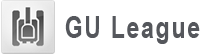
<style>
.page{position:relative;width:200px;height:55px;background:#ffffff}
.page>*{position:absolute;margin:0}
.t1{font:30px "Arial-BoldMT";letter-spacing:0.09em;color:#55575c;scale:0.75 1}
</style>
<div class="page">
<p class="t1" style="left:65px;top:16px;width:135px;height:28px">GU League</p>
</div>
